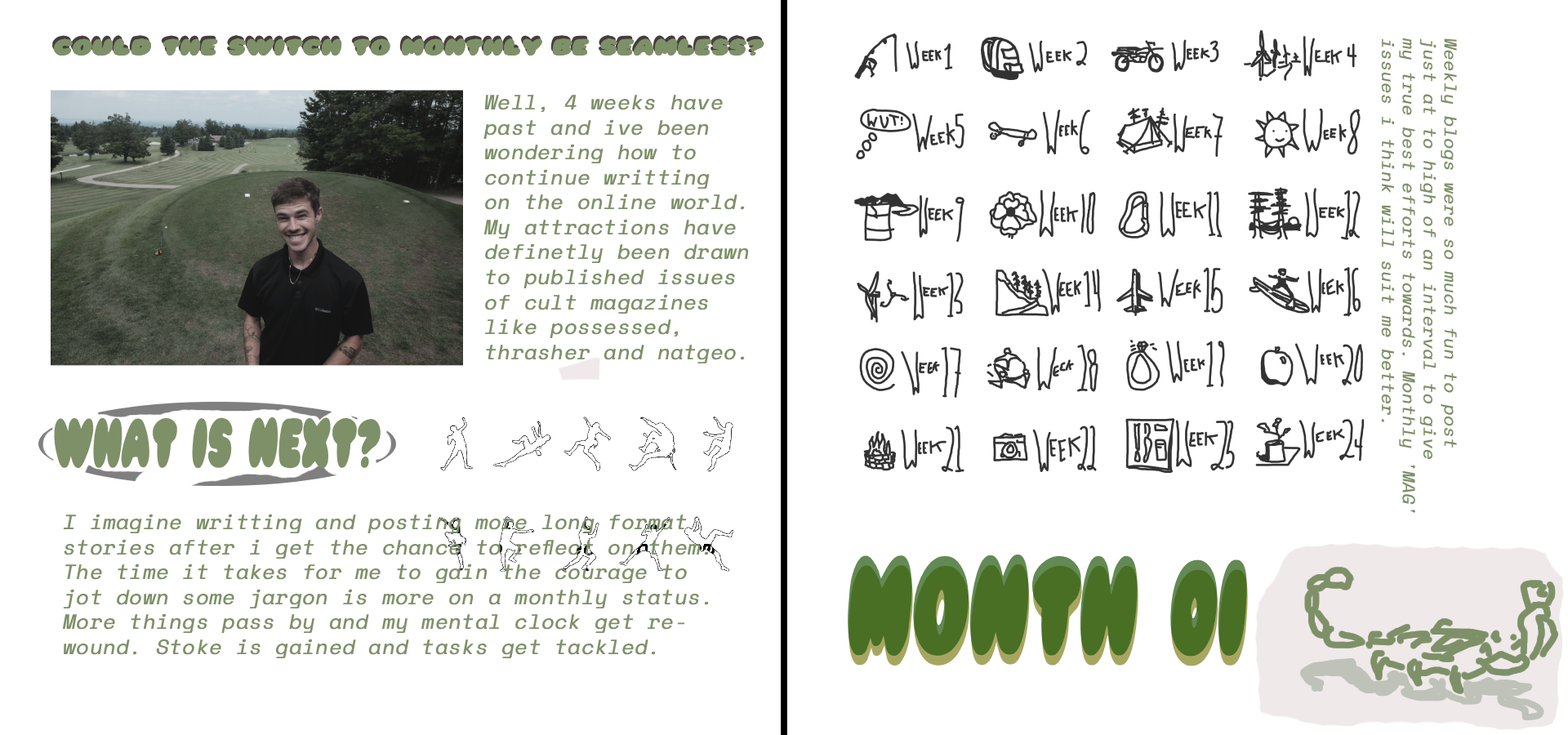
<style>
.page{position:relative;width:1568px;height:735px;background:#ffffff}
.page>*{position:absolute;margin:0}
.t1{font:20.8px "Pleasantly-Plump";font-weight:bold;font-style:italic}
.t2{font:20.8px "Pleasantly-Plump";color:#7e9068;font-weight:bold;font-style:italic}
.t3{font:17.4px "SpaceMono-Regular";color:#7e9068;font-weight:bold;font-style:italic}
.t4{font:20.8px "SpaceMono-Regular";color:#7e9068;font-weight:bold;font-style:italic}
.t5{font:62.4px "Pleasantly-Plump";color:#7e9068;font-weight:bold;font-style:italic;scale:0.48 1}
.t6{font:124.8px "Pleasantly-Plump";color:#496f25;font-weight:bold;font-style:italic;scale:0.48 1}
</style>
<div class="page">
<p class="t1" style="left:52px;top:35px;width:711px;height:17px">COULD THE SWITCH TO MONTHLY BE SEAMLESS?</p>
<p class="t2" style="left:53px;top:38px;width:711px;height:18px">COULD THE SWITCH TO MONTHLY BE SEAMLESS?</p>
<p class="t2" style="left:53px;top:38px;width:711px;height:18px">COULD THE SWITCH TO MONTHLY BE SEAMLESS?</p>
<p class="t3" style="left:1381px;top:38px;width:76px;height:475px;rotate:90deg">Weekly blogs were so much fun to post<br>just at to high of an interval to give <br>my true best efforts towards. Monthly 'MAG' <br>issues i think will suit me better.</p>
<p class="t4" style="left:483px;top:95px;width:266px;height:269px">Well, 4 weeks have<br>past and ive been <br>wondering how to<br>continue writting<br>on the online world.<br>My attractions have<br>definetly been drawn<br>to published issues <br>of cult magazines<br>like possessed, <br>thrasher and natgeo.</p>
<p class="t5" style="left:54px;top:417px;width:327px;height:52px">What is next?</p>
<p class="t4" style="left:62px;top:514px;width:647px;height:145px">I imagine writting and posting more long format <br>stories after i get the chance to reflect on them.<br>The time it takes for me to gain the courage to<br>jot down some jargon is more on a monthly status.<br>More things pass by and my mental clock get re-<br>wound. Stoke is gained and tasks get tackled.</p>
<p class="t6" style="left:847px;top:555px;width:401px;height:102px">MONTH 01</p>
<p class="t6" style="left:848px;top:564px;width:401px;height:102px">MONTH 01</p>
</div>
